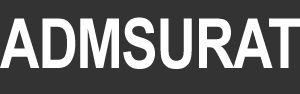
<style>
.page{position:relative;width:300px;height:94px;background:#333333}
.page>*{position:absolute;margin:0}
.t1{font:68.9px "Arial-BoldMT";letter-spacing:-0.02em;color:#ffffff;scale:0.79 1}
</style>
<div class="page">
<p class="t1" style="left:0px;top:17px;width:300px;height:52px">ADMSURAT</p>
</div>
